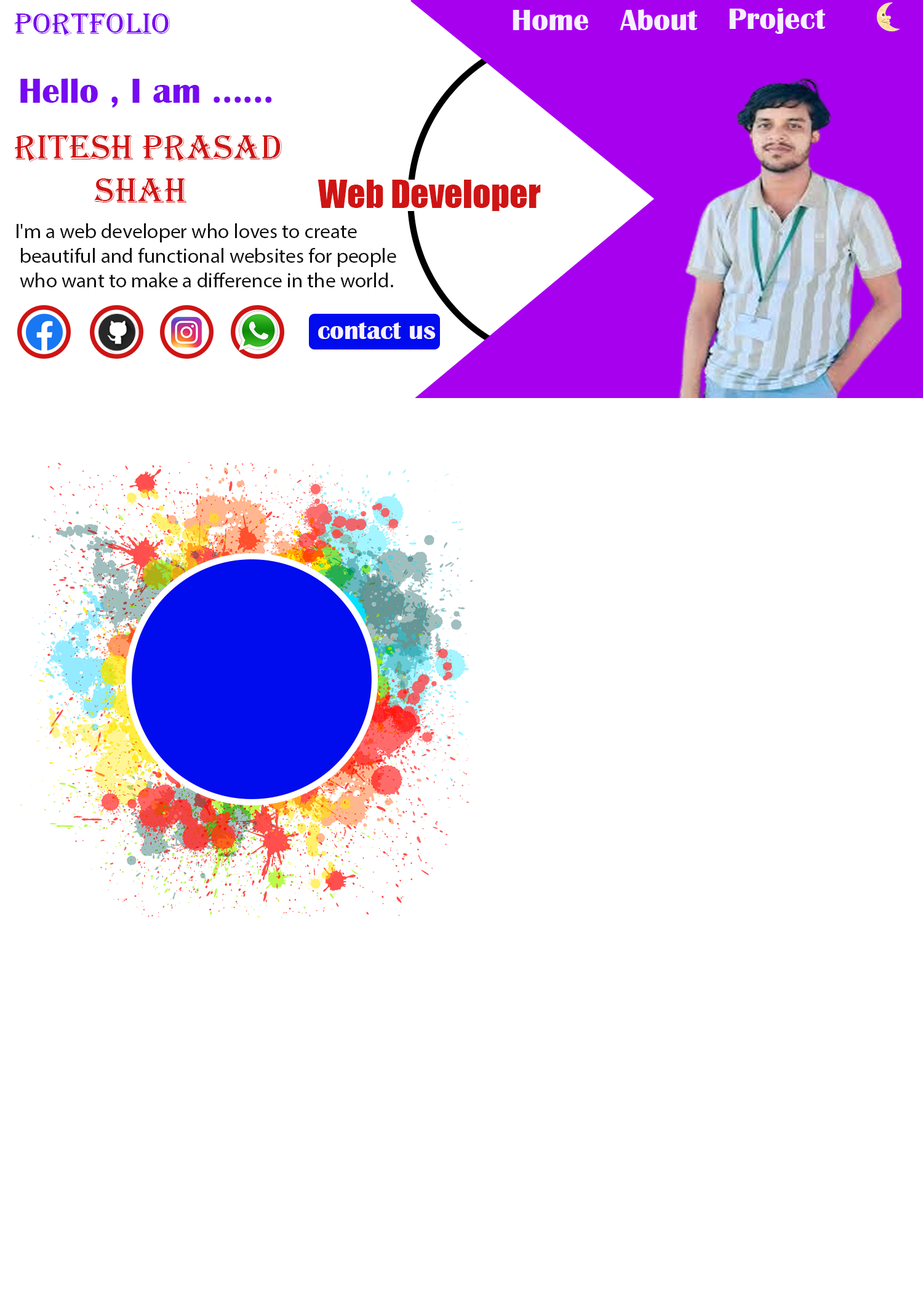
<style>
.page{position:relative;width:923px;height:1292px;background:#ffffff}
.page>*{position:absolute;margin:0}
.t1{font:30.8px "Algerian";color:#760af0}
.t2{font:30.8px "BritannicBold";color:#f7f0fe}
.t3{font:35.9px "BritannicBold";color:#760af0}
.t4{font:35.9px "Algerian";color:#cf1414}
.t5{font:35.9px "Impact";color:#cf1414}
.t6{font:20.5px "MyriadPro-Regular";color:#0d0e0c}
.t7{font:25.6px "BritannicBold";color:#f7f0fe}
</style>
<div class="page">
<p class="t1" style="left:14px;top:14px;width:156px;height:22px">Portfolio</p>
<p class="t2" style="left:513px;top:10px;width:75px;height:20px">Home</p>
<p class="t2" style="left:620px;top:9px;width:78px;height:21px">About</p>
<p class="t2" style="left:729px;top:8px;width:97px;height:26px">Project</p>
<p class="t3" style="left:20px;top:78px;width:252px;height:30px">Hello , I am ......</p>
<p class="t4" style="left:15px;top:135px;width:267px;height:67px">Ritesh Prasad<br>         Shah</p>
<p class="t5" style="left:317px;top:180px;width:224px;height:31px">Web Developer</p>
<p class="t6" style="left:17px;top:223px;width:379px;height:64px">I'm a web developer who loves to create<br> beautiful and functional websites for people<br> who want to make a difference in the world.</p>
<p class="t7" style="left:318px;top:322px;width:118px;height:17px">contact us</p>
</div>
